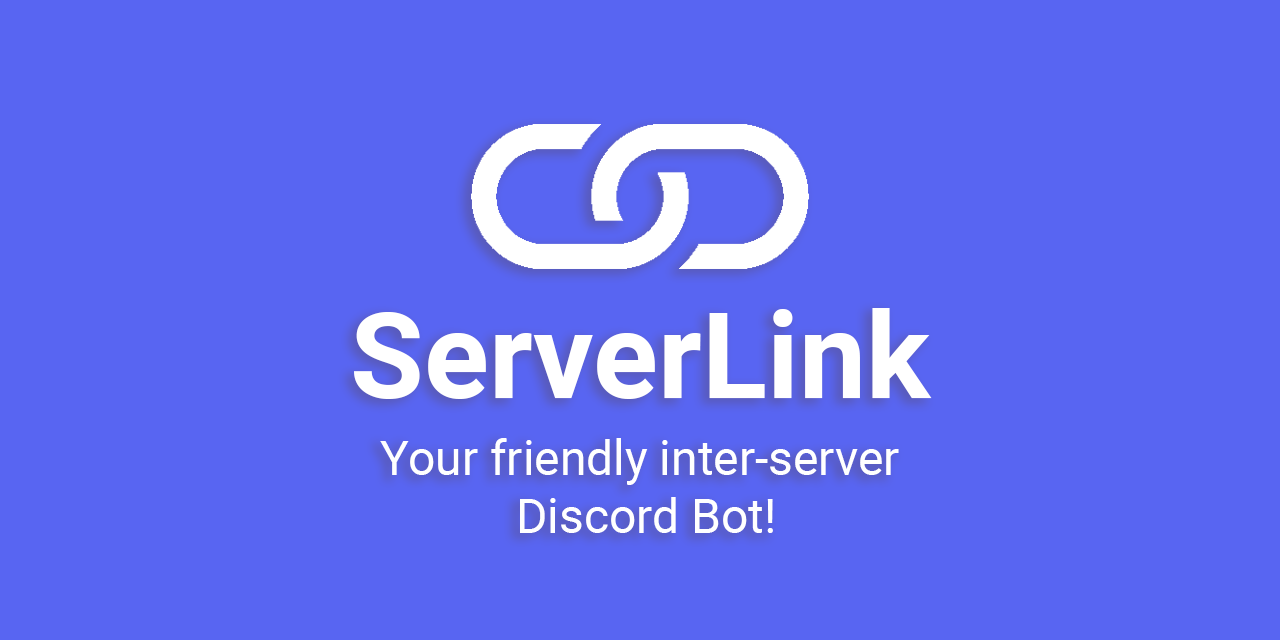
<style>
.page{position:relative;width:1280px;height:640px;background:#5865f2}
.page>*{position:absolute;margin:0}
.t1{font:120px "Roboto-Bold";color:#ffffff}
.t2{font:48px "Roboto-Regular";color:#ffffff}
</style>
<div class="page">
<p class="t1" style="left:354px;top:308px;width:578px;height:91px">ServerLink</p>
<p class="t2" style="left:380px;top:438px;width:519px;height:95px;text-align:center">Your friendly inter-server<br> Discord Bot!</p>
</div>
